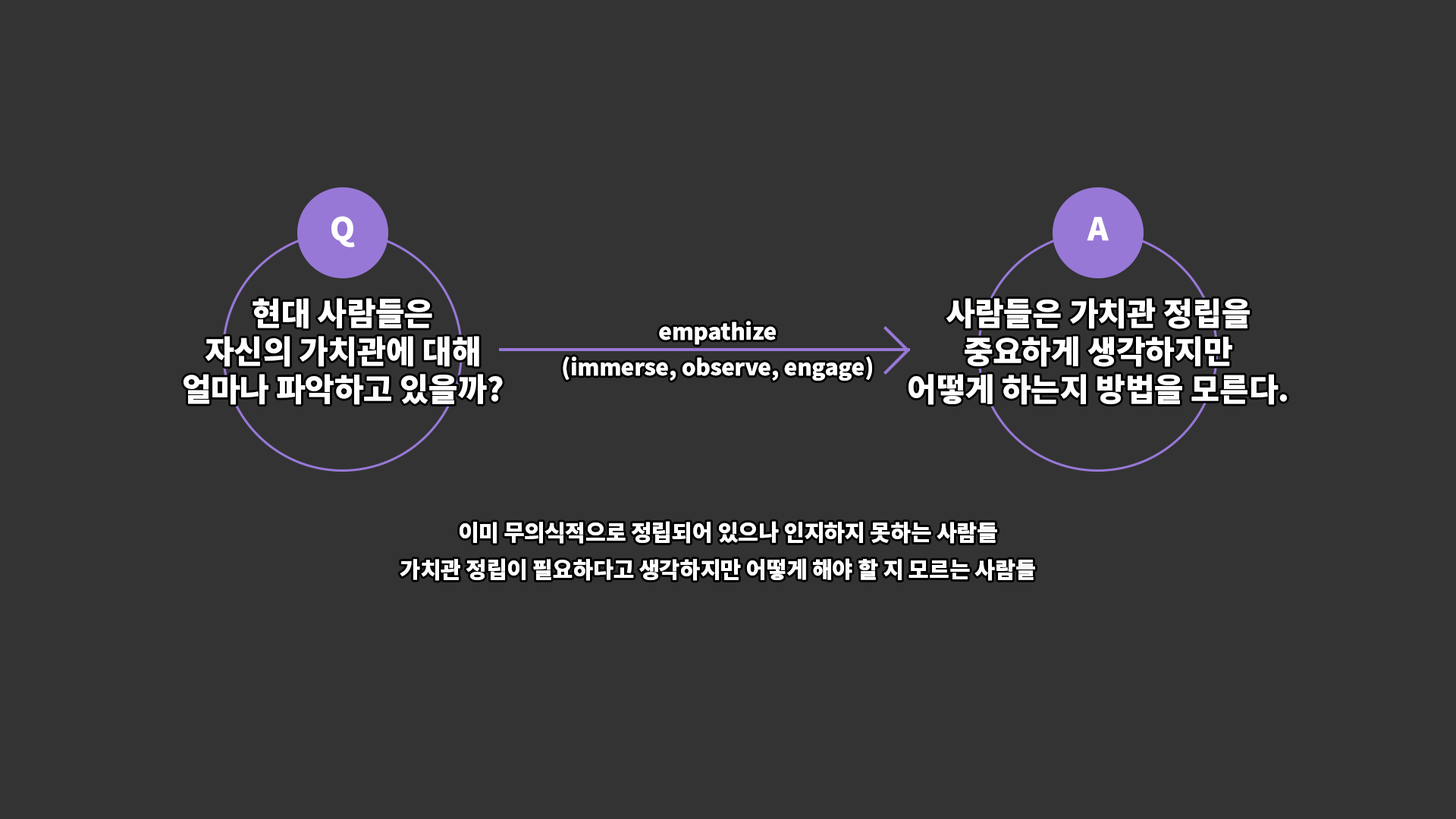
<style>
.page{position:relative;width:1456px;height:819px;background:#333333}
.page>*{position:absolute;margin:0}
.t1{font:31.6px "NotoSansCJKkr-Black";color:#ffffff}
.t2{font:22.1px "NotoSansCJKkr-Black";color:#ffffff}
</style>
<div class="page">
<p class="t1" style="left:331px;top:216px;width:24px;height:31px">Q</p>
<p class="t1" style="left:1087px;top:217px;width:22px;height:24px">A</p>
<p class="t1" style="left:184px;top:298px;width:319px;height:107px;text-align:center">현대 사람들은 <br>자신의 가치관에 대해 <br>얼마나 파악하고 있을까?</p>
<p class="t1" style="left:908px;top:298px;width:379px;height:107px;text-align:center">사람들은 가치관 정립을 <br>중요하게 생각하지만 <br>어떻게 하는지 방법을 모른다.</p>
<p class="t2" style="left:659px;top:321px;width:117px;height:24px">empathize</p>
<p class="t2" style="left:563px;top:356px;width:309px;height:25px">(immerse, observe, engage)</p>
<p class="t2" style="left:460px;top:521px;width:537px;height:23px">이미 무의식적으로 정립되어 있으나 인지하지 못하는 사람들</p>
<p class="t2" style="left:400px;top:558px;width:635px;height:23px">가치관 정립이 필요하다고 생각하지만 어떻게 해야 할 지 모르는 사람들</p>
</div>
